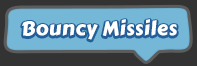
<style>
.page{position:relative;width:197px;height:66px;background:#74b7d7}
.page>*{position:absolute;margin:0}
.t1{font:20px "CarterOne";letter-spacing:0.025em;color:#ffffff}
</style>
<div class="page">
<p class="t1" style="left:22px;top:19px;width:155px;height:21px">Bouncy Missiles</p>
</div>
